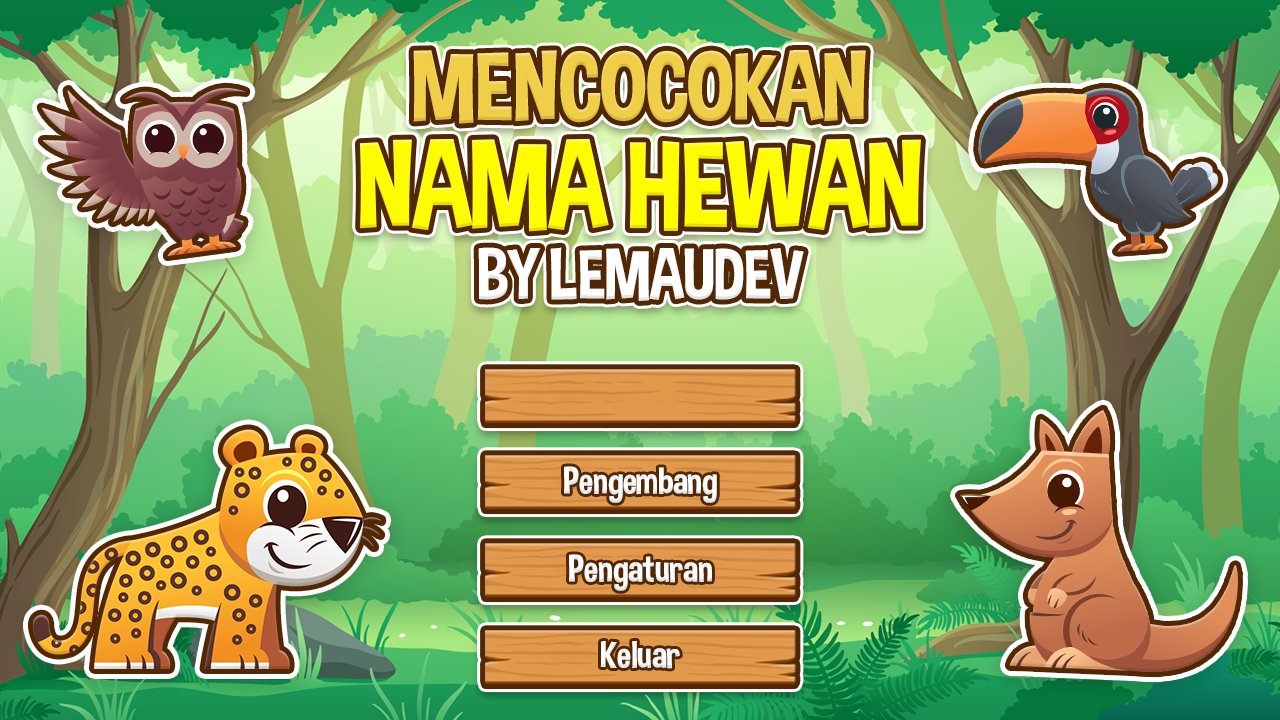
<style>
.page{position:relative;width:1280px;height:720px}
.page>*{position:absolute;margin:0}
.t1{font:99.7px "DimboRegular";letter-spacing:-0.01em;color:#f1ce48}
.t2{font:124.7px "DimboRegular";letter-spacing:-0.01em;color:#fffc00}
.t3{font:71.6px "DimboRegular";letter-spacing:-0.01em;color:#ffffff}
.t4{font:38.6px "DimboRegular";letter-spacing:-0.01em;color:#ffffff}
</style>
<div class="page">
<p class="t1" style="left:413px;top:50px;width:453px;height:74px">MENCOCOKAN</p>
<p class="t2" style="left:359px;top:139px;width:562px;height:93px">NAMA HEWAN</p>
<p class="t3" style="left:478px;top:247px;width:326px;height:54px">BY LEMAUDEV</p>
<p class="t4" style="left:564px;top:466px;width:153px;height:37px">Pengembang</p>
<p class="t4" style="left:569px;top:554px;width:143px;height:37px">Pengaturan</p>
<p class="t4" style="left:600px;top:640px;width:80px;height:29px">Keluar</p>
</div>
